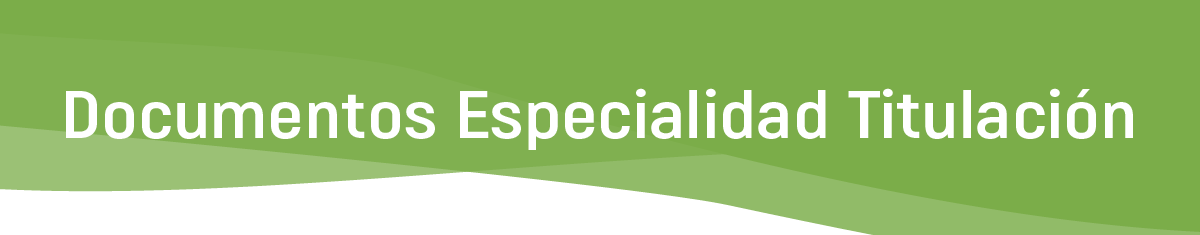
<style>
.page{position:relative;width:1200px;height:235px;background:#7bad49}
.page>*{position:absolute;margin:0}
.t1{font:66.7px "Akrobat-Bold";color:#ffffff;scale:1.2 1}
</style>
<div class="page">
<p class="t1" style="left:66px;top:88px;width:1067px;height:62px">Documentos Especialidad Titulación</p>
</div>
